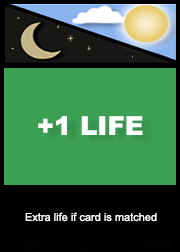
<style>
.page{position:relative;width:180px;height:252px;background:#3ca053}
.page>*{position:absolute;margin:0}
.t1{font:26px "Arial-Black";color:#ffffff}
.t2{font:11px "ArialMT";color:#ffffff}
</style>
<div class="page">
<p class="t1" style="left:38px;top:116px;width:105px;height:19px">+1 LIFE</p>
<p class="t2" style="left:25px;top:212px;width:132px;height:10px">Extra life if card is matched</p>
</div>
